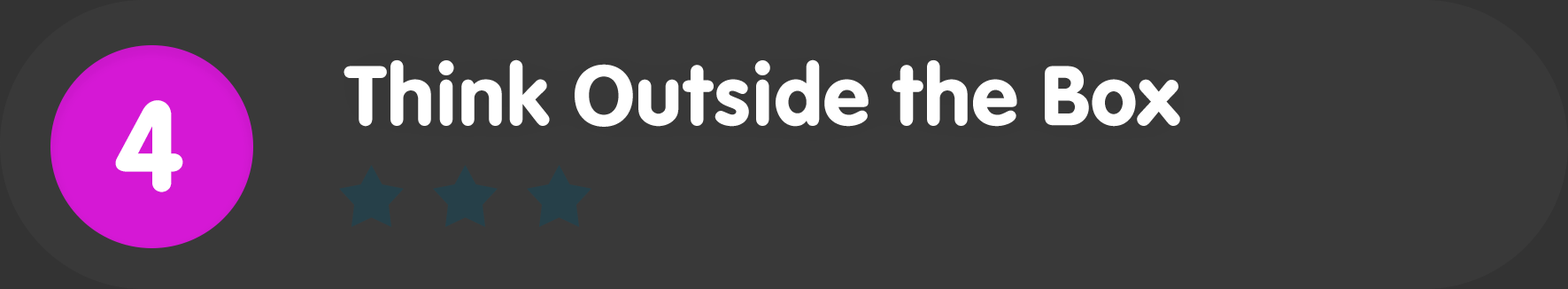
<style>
.page{position:relative;width:1568px;height:289px;background:#393939}
.page>*{position:absolute;margin:0}
.t1{font:88.5px "VAGRundschriftD";color:#ffffff}
.t2{font:132.8px "VAGRundschriftD";color:#ffffff}
</style>
<div class="page">
<p class="t1" style="left:344px;top:59px;width:836px;height:68px">Think Outside the Box</p>
<p class="t2" style="left:115px;top:100px;width:68px;height:92px">4</p>
</div>
